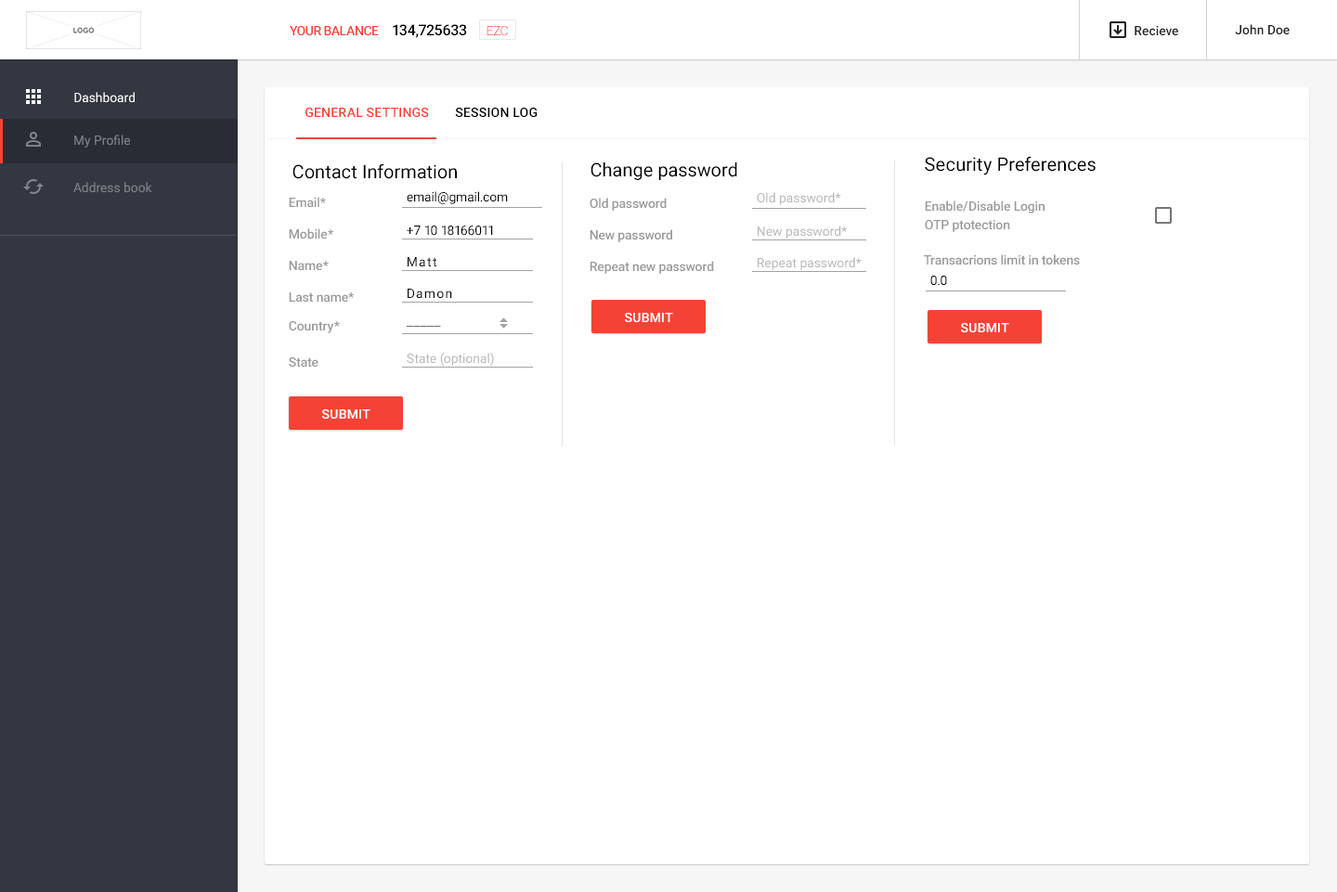
<style>
.page{position:relative;width:1337px;height:892px;background:#ffffff}
.page>*{position:absolute;margin:0}
.t1{font:13px "Roboto-Medium";letter-spacing:-0.04em;color:#f44336;text-transform:uppercase}
.t2{font:14.9px "Roboto-Medium";letter-spacing:-0.02em;color:#000000}
.t3{font:13px "Roboto-Light";letter-spacing:-0.04em;color:#f44336}
.t4{font:13px "Roboto-Medium";color:#212121}
.t5{font:13px "Roboto-Regular";color:#ffffff}
.t6{font:13px "Roboto-Medium";letter-spacing:0.01em;color:#f44336;text-transform:uppercase}
.t7{font:13px "Roboto-Medium";letter-spacing:0.01em;color:#000000;text-transform:uppercase}
.t8{font:13px "Roboto-Regular";color:#81848b}
.t9{font:18.6px "Roboto-Regular";letter-spacing:0.005em;color:#000000}
.t10{font:13px "Roboto-Medium";letter-spacing:-0.01em;color:#9a9a9a}
.t11{font:13px "Roboto-Regular";letter-spacing:-0.01em;color:#000000}
.t12{font:13px "Roboto-Regular";color:#b8b8b8}
.t13{font:13px/18.6px "Roboto-Medium";letter-spacing:-0.01em;color:#9a9a9a}
.t14{font:13px/18.6px "Roboto-Medium";letter-spacing:0.03em;color:#9a9a9a}
.t15{font:13px "Roboto-Medium";letter-spacing:0.03em;color:#9a9a9a}
.t16{font:13px "Roboto-Regular";letter-spacing:0.09em;color:#000000}
.t17{font:13px "Roboto-Medium";letter-spacing:0.01em;color:#ffffff;text-transform:uppercase}
.t18{font:13px "MyriadPro-Regular";letter-spacing:-0.01em}
</style>
<div class="page">
<p class="t1" style="left:290px;top:25px;width:89px;height:11px">Your balance</p>
<p class="t2" style="left:393px;top:24px;width:74px;height:14px">134,725633</p>
<p class="t3" style="left:486px;top:25px;width:22px;height:11px">EZC</p>
<p class="t4" style="left:1134px;top:25px;width:44px;height:11px">Recieve</p>
<p class="t4" style="left:1235px;top:24px;width:54px;height:11px">John Doe</p>
<p class="t5" style="left:74px;top:92px;width:61px;height:11px">Dashboard</p>
<p class="t6" style="left:305px;top:107px;width:124px;height:11px">General Settings</p>
<p class="t7" style="left:455px;top:107px;width:82px;height:11px">Session Log</p>
<p class="t8" style="left:74px;top:135px;width:56px;height:13px">My Profile</p>
<p class="t9" style="left:925px;top:156px;width:170px;height:19px">Seсurity Preferences</p>
<p class="t9" style="left:292px;top:163px;width:165px;height:16px">Contact Information</p>
<p class="t9" style="left:590px;top:162px;width:147px;height:18px">Change password</p>
<p class="t8" style="left:73px;top:182px;width:79px;height:11px">Address book</p>
<p class="t10" style="left:289px;top:197px;width:37px;height:11px">Email*</p>
<p class="t11" style="left:407px;top:191px;width:101px;height:13px">email@gmail.com</p>
<p class="t10" style="left:589px;top:198px;width:77px;height:13px">Old password</p>
<p class="t12" style="left:757px;top:192px;width:84px;height:13px">Old password*</p>
<p class="t13" style="left:925px;top:201px;width:119px;height:31px">Enable<span class="t14">/</span>Disable Login<br>OTP ptotection</p>
<p class="t10" style="left:289px;top:228px;width:44px;height:11px">Mobil<span class="t15">e</span>*</p>
<p class="t11" style="left:407px;top:226px;width:86px;height:10px"><span class="t16">+</span>7 10 18166011</p>
<p class="t10" style="left:589px;top:229px;width:83px;height:13px">New password</p>
<p class="t12" style="left:757px;top:226px;width:90px;height:13px">New password*</p>
<p class="t16" style="left:408px;top:257px;width:28px;height:10px">Matt</p>
<p class="t12" style="left:757px;top:257px;width:104px;height:13px">Repeat password*</p>
<p class="t10" style="left:924px;top:254px;width:156px;height:11px">Transacrions limit in tokens</p>
<p class="t10" style="left:289px;top:261px;width:40px;height:10px">Nam<span class="t15">e</span>*</p>
<p class="t10" style="left:589px;top:261px;width:125px;height:13px">Repeat new password</p>
<p class="t11" style="left:930px;top:275px;width:17px;height:11px">0.0</p>
<p class="t10" style="left:289px;top:292px;width:65px;height:11px">Last name*</p>
<p class="t16" style="left:408px;top:289px;width:44px;height:10px">Damon</p>
<p class="t17" style="left:625px;top:312px;width:48px;height:11px">submit</p>
<p class="t10" style="left:289px;top:320px;width:51px;height:13px">Country*</p>
<p class="t18" style="left:406px;top:326px;width:35px;height:1px">_____</p>
<p class="t17" style="left:961px;top:322px;width:48px;height:11px">submit</p>
<p class="t12" style="left:407px;top:352px;width:87px;height:15px">State (optional)</p>
<p class="t10" style="left:289px;top:356px;width:29px;height:12px">State</p>
<p class="t17" style="left:322px;top:408px;width:48px;height:12px">submit</p>
</div>
